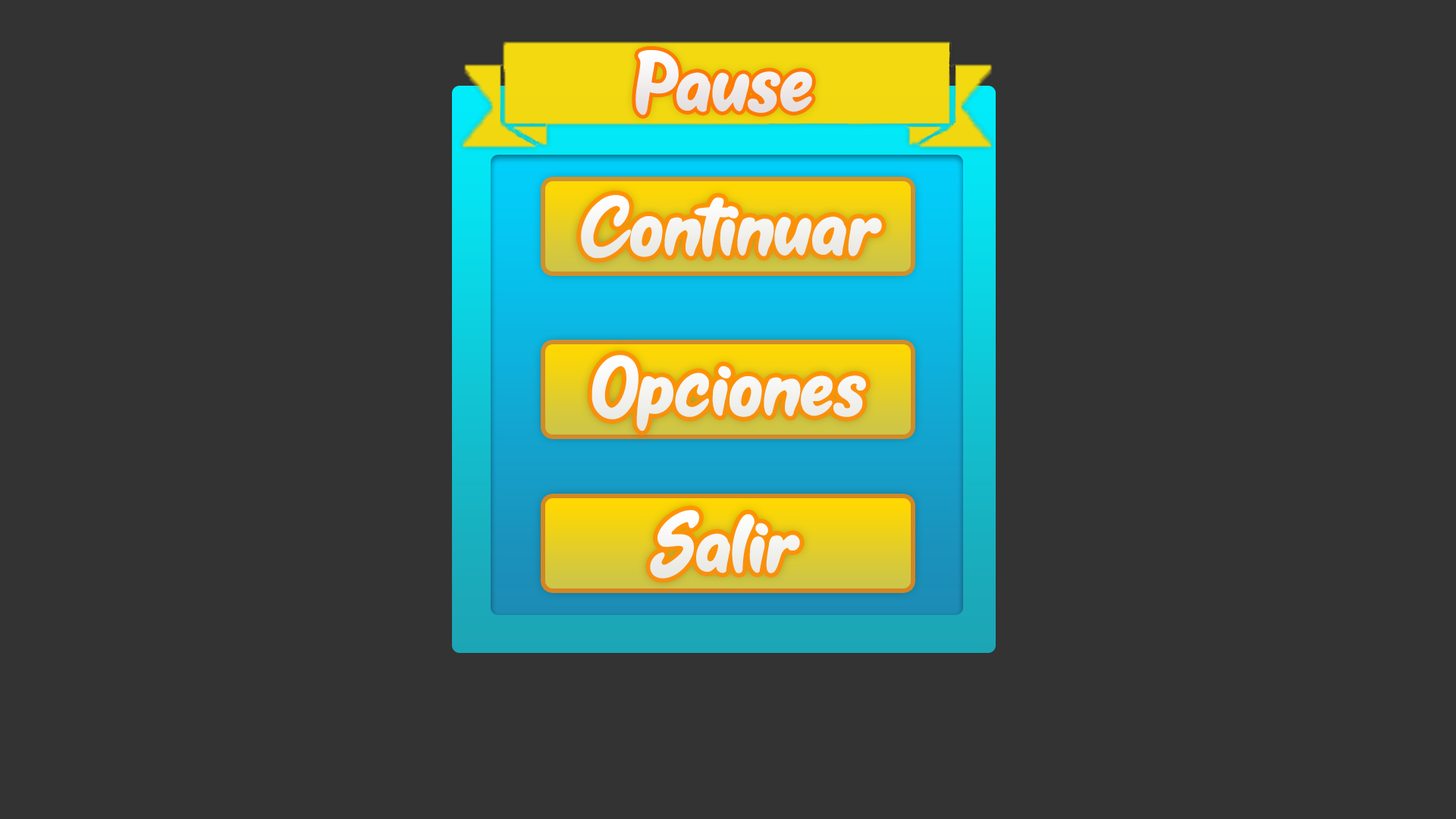
<style>
.page{position:relative;width:1456px;height:819px;background:#333333}
.page>*{position:absolute;margin:0}
.t1{font:84.2px "KestoySelfie";color:#eeeaea;scale:1.05 1}
.t2{font:84.2px "KestoySelfie";color:#ffffff;scale:1.05 1}
</style>
<div class="page">
<p class="t1" style="left:635px;top:50px;width:177px;height:65px">Pause</p>
<p class="t2" style="left:581px;top:195px;width:301px;height:64px">Continuar</p>
<p class="t2" style="left:591px;top:355px;width:275px;height:76px">Opciones</p>
<p class="t2" style="left:650px;top:510px;width:150px;height:69px">Salir</p>
</div>
